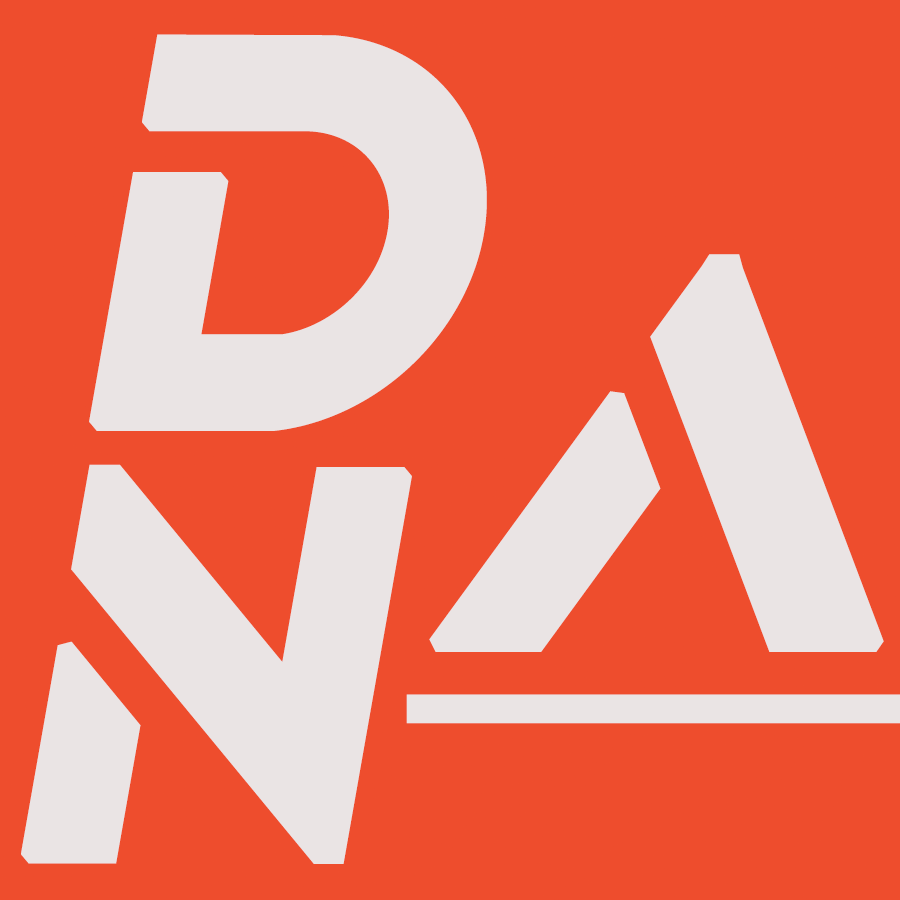
<style>
.page{position:relative;width:900px;height:900px;background:#ee4d2d}
.page>*{position:absolute;margin:0}
.t1{font:576px "AquireBold";color:#eae4e4;font-weight:bold;font-style:italic}
</style>
<div class="page">
<p class="t1" style="left:89px;top:34px;width:398px;height:397px">D</p>
<p class="t1" style="left:21px;top:464px;width:391px;height:400px">N</p>
</div>
